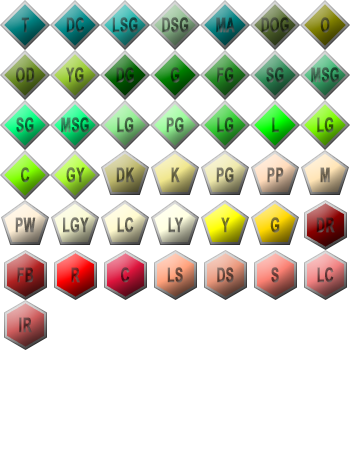
<style>
.page{position:relative;width:350px;height:450px;background:#ffffff}
.page>*{position:absolute;margin:0}
.t1{font:20px "Arial-BoldMT";letter-spacing:0.03em;color:#2e5454;font-weight:bold;scale:0.6 1}
.t2{font:20px "Arial-BoldMT";letter-spacing:0.03em;font-weight:bold;scale:0.6 1}
.t3{font:20px "Arial-BoldMT";letter-spacing:0.03em;color:#456445;font-weight:bold;scale:0.6 1}
.t4{font:20px "Arial-BoldMT";letter-spacing:0.03em;color:#57563d;font-weight:bold;scale:0.6 1}
.t5{font:20px "Arial-BoldMT";letter-spacing:0.03em;color:#6d694c;font-weight:bold;scale:0.6 1}
.t6{font:20px "Arial-BoldMT";letter-spacing:0.03em;color:#766a5e;font-weight:bold;scale:0.6 1}
.t7{font:20px "Arial-BoldMT";letter-spacing:0.03em;color:#736a5a;font-weight:bold;scale:0.6 1}
.t8{font:20px "Arial-BoldMT";letter-spacing:0.03em;color:#706b63;font-weight:bold;scale:0.6 1}
.t9{font:20px "Arial-BoldMT";letter-spacing:0.03em;color:#6c6c5e;font-weight:bold;scale:0.6 1}
.t10{font:20px "Arial-BoldMT";letter-spacing:0.03em;color:#6a685a;font-weight:bold;scale:0.6 1}
.t11{font:20px "Arial-BoldMT";letter-spacing:0.03em;color:#6c6c62;font-weight:bold;scale:0.6 1}
.t12{font:20px "Arial-BoldMT";letter-spacing:0.03em;color:#77772a;font-weight:bold;scale:0.6 1}
.t13{font:20px "Arial-BoldMT";letter-spacing:0.03em;color:#6e4c41;font-weight:bold;scale:0.6 1}
.t14{font:20px "Arial-BoldMT";letter-spacing:0.03em;color:#724c48;font-weight:bold;scale:0.6 1}
.t15{font:20px "Arial-BoldMT";letter-spacing:0.03em;color:#633f3f;font-weight:bold;scale:0.6 1}
</style>
<div class="page">
<p class="t1" style="left:21px;top:17px;width:8px;height:16px">T</p>
<p class="t2" style="left:66px;top:17px;width:18px;height:16px">DC</p>
<p class="t2" style="left:112px;top:17px;width:26px;height:16px">LSG</p>
<p class="t2" style="left:162px;top:17px;width:27px;height:16px">DSG</p>
<p class="t2" style="left:216px;top:17px;width:19px;height:16px">MA</p>
<p class="t2" style="left:261px;top:17px;width:28px;height:16px">DOG</p>
<p class="t2" style="left:320px;top:17px;width:10px;height:16px">O</p>
<p class="t2" style="left:16px;top:67px;width:19px;height:16px">OD</p>
<p class="t2" style="left:66px;top:67px;width:18px;height:16px">YG</p>
<p class="t2" style="left:116px;top:67px;width:18px;height:16px">DG</p>
<p class="t2" style="left:170px;top:67px;width:10px;height:16px">G</p>
<p class="t2" style="left:217px;top:67px;width:17px;height:16px">FG</p>
<p class="t2" style="left:266px;top:67px;width:18px;height:16px">SG</p>
<p class="t2" style="left:311px;top:67px;width:28px;height:16px">MSG</p>
<p class="t2" style="left:16px;top:117px;width:18px;height:16px">SG</p>
<p class="t2" style="left:61px;top:117px;width:28px;height:16px">MSG</p>
<p class="t3" style="left:117px;top:117px;width:17px;height:16px">LG</p>
<p class="t2" style="left:166px;top:117px;width:18px;height:16px">PG</p>
<p class="t2" style="left:217px;top:117px;width:17px;height:16px">LG</p>
<p class="t2" style="left:272px;top:117px;width:7px;height:16px">L</p>
<p class="t2" style="left:317px;top:117px;width:17px;height:16px">LG</p>
<p class="t2" style="left:21px;top:167px;width:9px;height:16px">C</p>
<p class="t2" style="left:66px;top:167px;width:19px;height:16px">GY</p>
<p class="t4" style="left:116px;top:167px;width:19px;height:16px">DK</p>
<p class="t5" style="left:171px;top:167px;width:9px;height:16px">K</p>
<p class="t2" style="left:216px;top:167px;width:18px;height:16px">PG</p>
<p class="t6" style="left:267px;top:167px;width:17px;height:16px">PP</p>
<p class="t7" style="left:320px;top:167px;width:10px;height:16px">M</p>
<p class="t8" style="left:15px;top:217px;width:21px;height:16px">PW</p>
<p class="t9" style="left:63px;top:217px;width:26px;height:16px">LGY</p>
<p class="t10" style="left:117px;top:217px;width:17px;height:16px">LC</p>
<p class="t11" style="left:168px;top:217px;width:15px;height:16px">LY</p>
<p class="t12" style="left:221px;top:217px;width:9px;height:16px">Y</p>
<p class="t2" style="left:270px;top:217px;width:10px;height:16px">G</p>
<p class="t2" style="left:316px;top:217px;width:19px;height:16px">DR</p>
<p class="t2" style="left:17px;top:267px;width:17px;height:16px">FB</p>
<p class="t2" style="left:71px;top:267px;width:9px;height:16px">R</p>
<p class="t2" style="left:121px;top:267px;width:9px;height:16px">C</p>
<p class="t13" style="left:167px;top:267px;width:16px;height:16px">LS</p>
<p class="t2" style="left:217px;top:267px;width:17px;height:16px">DS</p>
<p class="t14" style="left:271px;top:267px;width:8px;height:16px">S</p>
<p class="t2" style="left:317px;top:267px;width:17px;height:16px">LC</p>
<p class="t15" style="left:19px;top:317px;width:13px;height:16px">IR</p>
</div>
